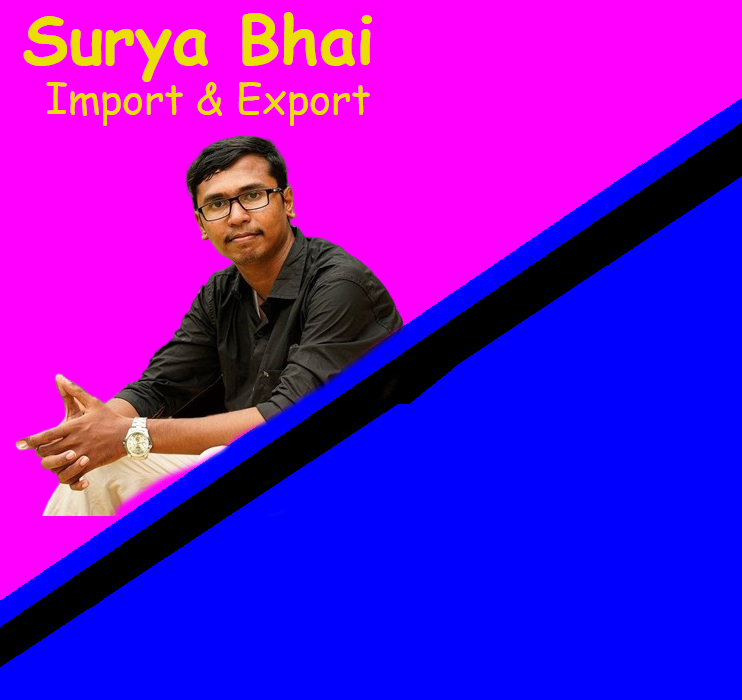
<style>
.page{position:relative;width:742px;height:700px;background:#0000ff}
.page>*{position:absolute;margin:0}
.t1{font:66.7px "ComicSansMS-Bold";color:#ebde07}
.t2{font:41.7px "ComicSansMS";color:#ebde07}
</style>
<div class="page">
<p class="t1" style="left:23px;top:12px;width:349px;height:70px">Surya Bhai</p>
<p class="t2" style="left:46px;top:82px;width:324px;height:44px">Import &amp; Export</p>
</div>
